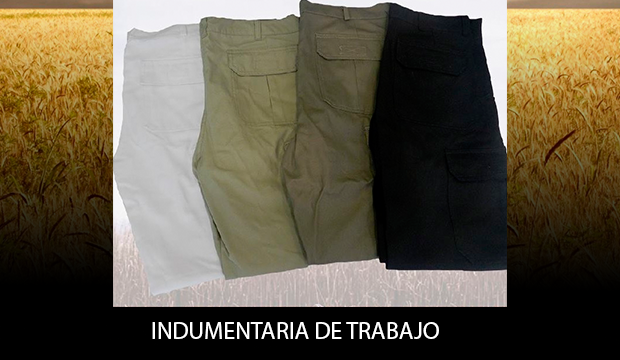
<style>
.page{position:relative;width:620px;height:360px}
.page>*{position:absolute;margin:0}
.t1{font:24px "MyriadPro-Regular";color:#ffffff}
</style>
<div class="page">
<p class="t1" style="left:152px;top:322px;width:287px;height:17px">INDUMENTARIA DE TRABAJO</p>
</div>
